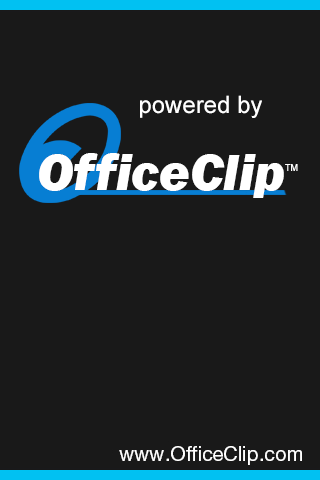
<style>
.page{position:relative;width:320px;height:480px;background:#191919}
.page>*{position:absolute;margin:0}
.t1{font:24px "ArialMT";color:#ffffff}
.t2{font:53px "FranklinGothic-HeavyItalic";color:#ffffff}
.t3{font:9px "ArialMT";color:#ffffff}
.t4{font:20px "HelveticaNeueLTPro-Roman";color:#ffffff}
</style>
<div class="page">
<p class="t1" style="left:140px;top:95px;width:122px;height:23px">powered by</p>
<p class="t2" style="left:39px;top:153px;width:245px;height:45px">OfficeClip</p>
<p class="t3" style="left:285px;top:164px;width:13px;height:7px">TM</p>
<p class="t4" style="left:119px;top:446px;width:183px;height:19px">www.OfficeClip.com</p>
</div>
